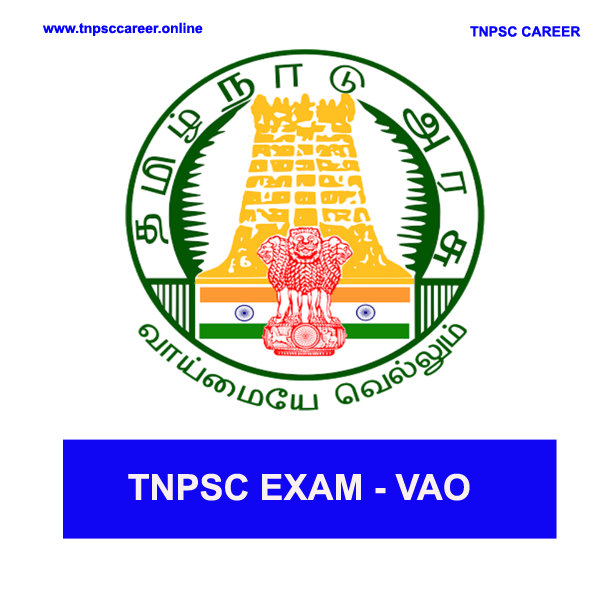
<style>
.page{position:relative;width:600px;height:600px;background:#ffffff}
.page>*{position:absolute;margin:0}
.t1{font:14px "Arial-BoldMT";color:#0600fe}
.t2{font:36px "Arial-BoldMT";color:#fbf0f0}
</style>
<div class="page">
<p class="t1" style="left:43px;top:22px;width:160px;height:14px">www.tnpsccareer.online</p>
<p class="t1" style="left:470px;top:26px;width:111px;height:11px">TNPSC CAREER</p>
<p class="t2" style="left:128px;top:473px;width:342px;height:28px">TNPSC EXAM - VAO</p>
</div>
